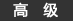
<style>
.page{position:relative;width:73px;height:21px;background:#333333}
.page>*{position:absolute;margin:0}
.t1{font:14.6px "MicrosoftYaHei";letter-spacing:1.02em;color:#ffffff;font-weight:bold}
</style>
<div class="page">
<p class="t1" style="left:13px;top:2px;width:45px;height:16px">高级</p>
</div>
